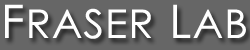
<style>
.page{position:relative;width:250px;height:50px;background:#666666}
.page>*{position:absolute;margin:0}
.t1{font:39.6px "CenturyGothic";letter-spacing:0.025em;color:#ffffff;scale:1.05 1}
.t2{font:46.2px "CenturyGothic";letter-spacing:0.025em;color:#ffffff;scale:1.05 1}
</style>
<div class="page">
<p class="t1" style="left:5px;top:4px;width:241px;height:35px"><span class="t2">F</span>RASER<span class="t2"> L</span>AB</p>
</div>
